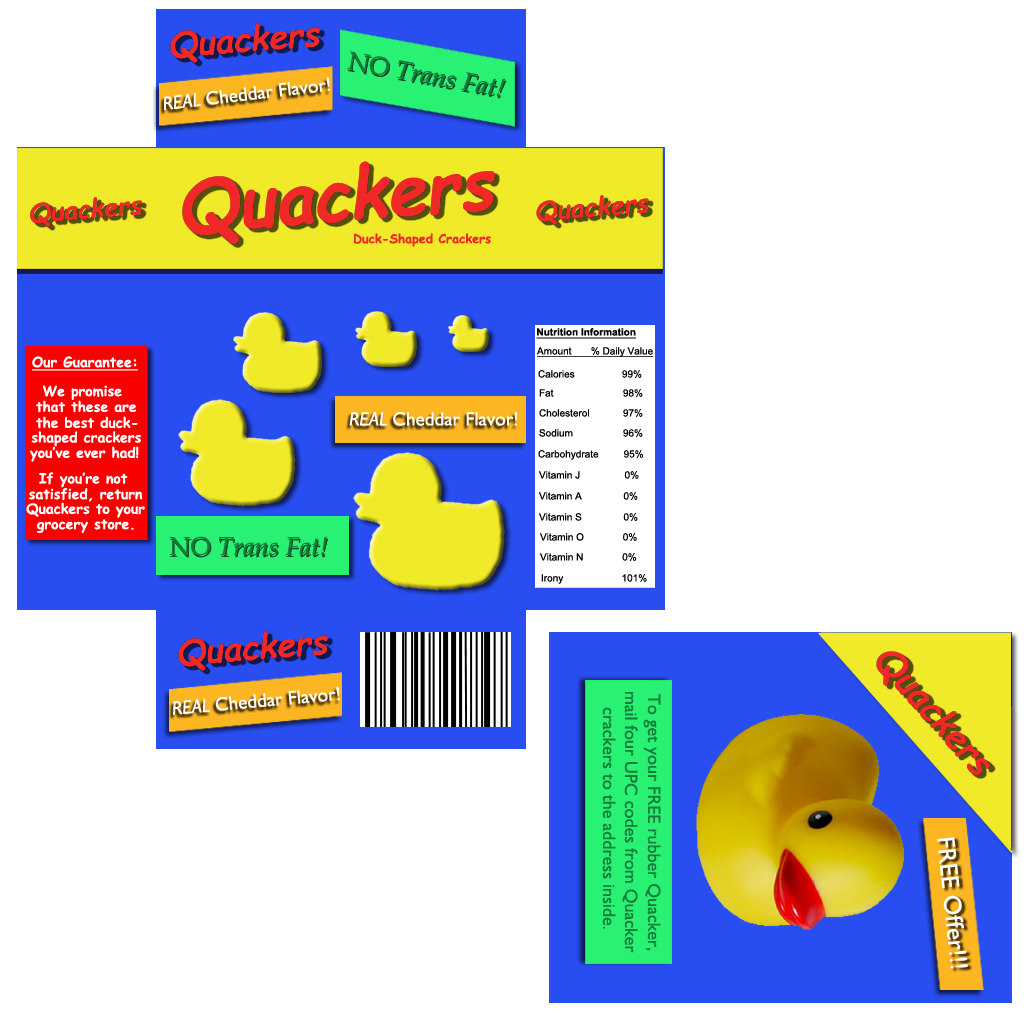
<style>
.page{position:relative;width:1024px;height:1024px;background:#ffffff}
.page>*{position:absolute;margin:0}
.t1{font:35px "ComicSansMS-Bold";color:#f12828;scale:0.95 1}
.t2{font:25.7px "BookAntiqua-Italic";color:#147d3b}
.t3{font:25.7px "BookAntiqua";color:#147d3b}
.t4{font:19.2px "GillSans";color:#ffffff}
.t5{font:19.2px "GillSans-Italic";color:#ffffff}
.t6{font:73.2px "ComicSansMS-Bold";color:#f12828;scale:0.95 1}
.t7{font:26.2px "ComicSansMS-Bold";color:#f12828;scale:0.95 1}
.t8{font:12.5px "ComicSansMS-Bold";color:#f12828}
.t9{font:10px "Arial-BoldMT";color:#000000;text-decoration:underline}
.t10{font:10px "ArialMT";color:#000000;text-decoration:underline}
.t11{font:14px "ComicSansMS-Bold";color:#ffffff;text-decoration:underline}
.t12{font:10px "ArialMT";color:#000000}
.t13{font:14px "ComicSansMS-Bold";color:#ffffff}
.t14{font:36.4px "ComicSansMS-Bold";color:#f12828;scale:0.95 1}
.t15{font:18px "GillSans";color:#147d3b}
.t16{font:25px "GillSans";color:#ffffff}
</style>
<div class="page">
<p class="t1" style="left:170px;top:23px;width:150px;height:40px;rotate:-4deg">Quackers</p>
<p class="t2" style="left:347px;top:51px;width:159px;height:46px;rotate:10deg"><span class="t3">NO </span>Trans Fat!</p>
<p class="t4" style="left:164px;top:77px;width:167px;height:34px;rotate:-7deg"><span class="t5">REAL </span>Cheddar Flavor!</p>
<p class="t6" style="left:182px;top:161px;width:313px;height:84px;rotate:-4deg">Quackers</p>
<p class="t7" style="left:30px;top:197px;width:112px;height:30px;rotate:-4deg">Quackers</p>
<p class="t7" style="left:536px;top:195px;width:113px;height:30px;rotate:-4deg">Quackers</p>
<p class="t8" style="left:353px;top:233px;width:138px;height:14px">Duck-Shaped Crackers</p>
<p class="t9" style="left:536px;top:328px;width:100px;height:11px">Nutrition Information</p>
<p class="t10" style="left:536px;top:347px;width:118px;height:10px">Amount       % Daily Value</p>
<p class="t11" style="left:32px;top:356px;width:106px;height:15px">Our Guarantee:</p>
<p class="t12" style="left:538px;top:370px;width:104px;height:8px">Calories                 99%</p>
<p class="t13" style="left:42px;top:385px;width:80px;height:15px">We promise</p>
<p class="t12" style="left:539px;top:389px;width:104px;height:8px">Fat                         98%</p>
<p class="t13" style="left:36px;top:400px;width:101px;height:13px">that these are</p>
<p class="t4" style="left:349px;top:412px;width:169px;height:14px"><span class="t5">REAL </span>Cheddar Flavor!</p>
<p class="t12" style="left:539px;top:409px;width:104px;height:8px">Cholesterol            97%</p>
<p class="t13" style="left:36px;top:416px;width:102px;height:13px">the best duck-</p>
<p class="t13" style="left:31px;top:431px;width:110px;height:16px">shaped crackers</p>
<p class="t12" style="left:539px;top:429px;width:104px;height:8px">Sodium                  96%</p>
<p class="t13" style="left:30px;top:446px;width:109px;height:16px">you’ve ever had!</p>
<p class="t12" style="left:538px;top:450px;width:105px;height:10px">Carbohydrate         95%</p>
<p class="t13" style="left:39px;top:472px;width:89px;height:16px">If you’re not</p>
<p class="t12" style="left:539px;top:471px;width:100px;height:8px">Vitamin J                0%</p>
<p class="t13" style="left:29px;top:488px;width:114px;height:14px">satisfied, return</p>
<p class="t12" style="left:539px;top:492px;width:99px;height:8px">Vitamin A               0%</p>
<p class="t13" style="left:26px;top:502px;width:119px;height:16px">Quackers to your</p>
<p class="t13" style="left:37px;top:519px;width:97px;height:14px">grocery store.</p>
<p class="t12" style="left:539px;top:513px;width:99px;height:8px">Vitamin S               0%</p>
<p class="t12" style="left:540px;top:533px;width:97px;height:8px">Vitamin O              0%</p>
<p class="t2" style="left:169px;top:536px;width:158px;height:20px"><span class="t3">NO </span>Trans Fat!</p>
<p class="t12" style="left:540px;top:553px;width:97px;height:8px">Vitamin N              0%</p>
<p class="t12" style="left:541px;top:574px;width:106px;height:10px">Irony                     101%</p>
<p class="t1" style="left:178px;top:631px;width:150px;height:40px;rotate:-4deg">Quackers</p>
<p class="t14" style="left:876px;top:651px;width:115px;height:124px;rotate:48deg">Quackers</p>
<p class="t4" style="left:173px;top:686px;width:167px;height:29px;rotate:-5deg"><span class="t5">REAL </span>Cheddar Flavor!</p>
<p class="t15" style="left:622px;top:692px;width:16px;height:261px;rotate:90deg">mail four UPC codes from Quacker</p>
<p class="t15" style="left:643px;top:694px;width:18px;height:257px;rotate:90deg">To get your FREE rubber Quacker,</p>
<p class="t15" style="left:602px;top:707px;width:14px;height:222px;rotate:90deg">crackers to the address inside.</p>
<p class="t16" style="left:937px;top:837px;width:31px;height:132px;rotate:84deg">FREE Offer!!!</p>
</div>
